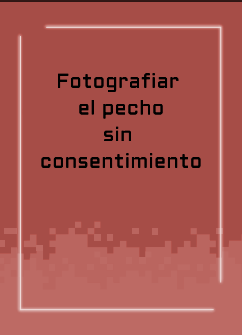
<style>
.page{position:relative;width:242px;height:335px;background:#a64d47}
.page>*{position:absolute;margin:0}
.t1{font:20px/26.7px "Aldrich-Regular";letter-spacing:0.015em;color:#000000}
</style>
<div class="page">
<p class="t1" style="left:41px;top:73px;width:160px;height:95px;text-align:center">Fotografiar <br>el pecho<br>sin <br>consentimiento</p>
</div>
